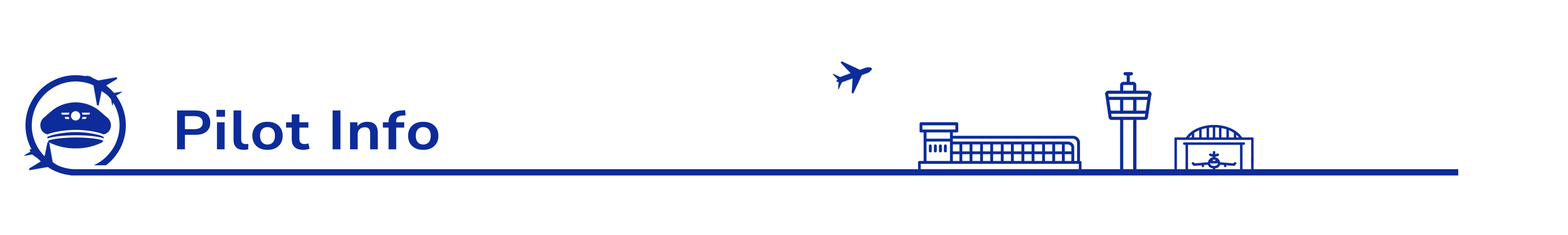
<style>
.page{position:relative;width:1568px;height:235px;background:#ffffff}
.page>*{position:absolute;margin:0}
.t1{font:54.9px "NunitoSans-Bold";letter-spacing:0.02em;color:#0d2c99;scale:1.1 1}
</style>
<div class="page">
<p class="t1" style="left:177px;top:110px;width:262px;height:40px">Pilot Info</p>
</div>
